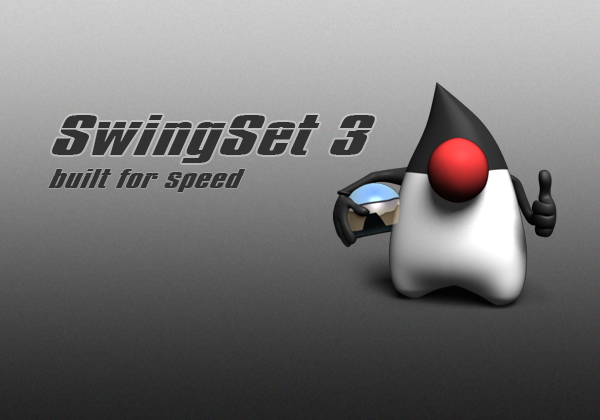
<style>
.page{position:relative;width:600px;height:420px}
.page>*{position:absolute;margin:0}
.t1{font:49.1px "Impossible-1000";color:#323232}
.t2{font:23px "Impossible-1000";color:#323232}
</style>
<div class="page">
<p class="t1" style="left:52px;top:115px;width:323px;height:48px">SwingSet 3</p>
<p class="t2" style="left:48px;top:169px;width:198px;height:23px">built for speed</p>
</div>
